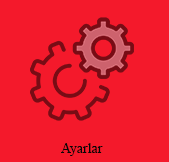
<style>
.page{position:relative;width:169px;height:162px;background:#f4192b}
.page>*{position:absolute;margin:0}
.t1{font:14px "TimesNewRomanPSMT";color:#060606}
</style>
<div class="page">
<p class="t1" style="left:61px;top:143px;width:42px;height:13px">Ayarlar</p>
</div>
